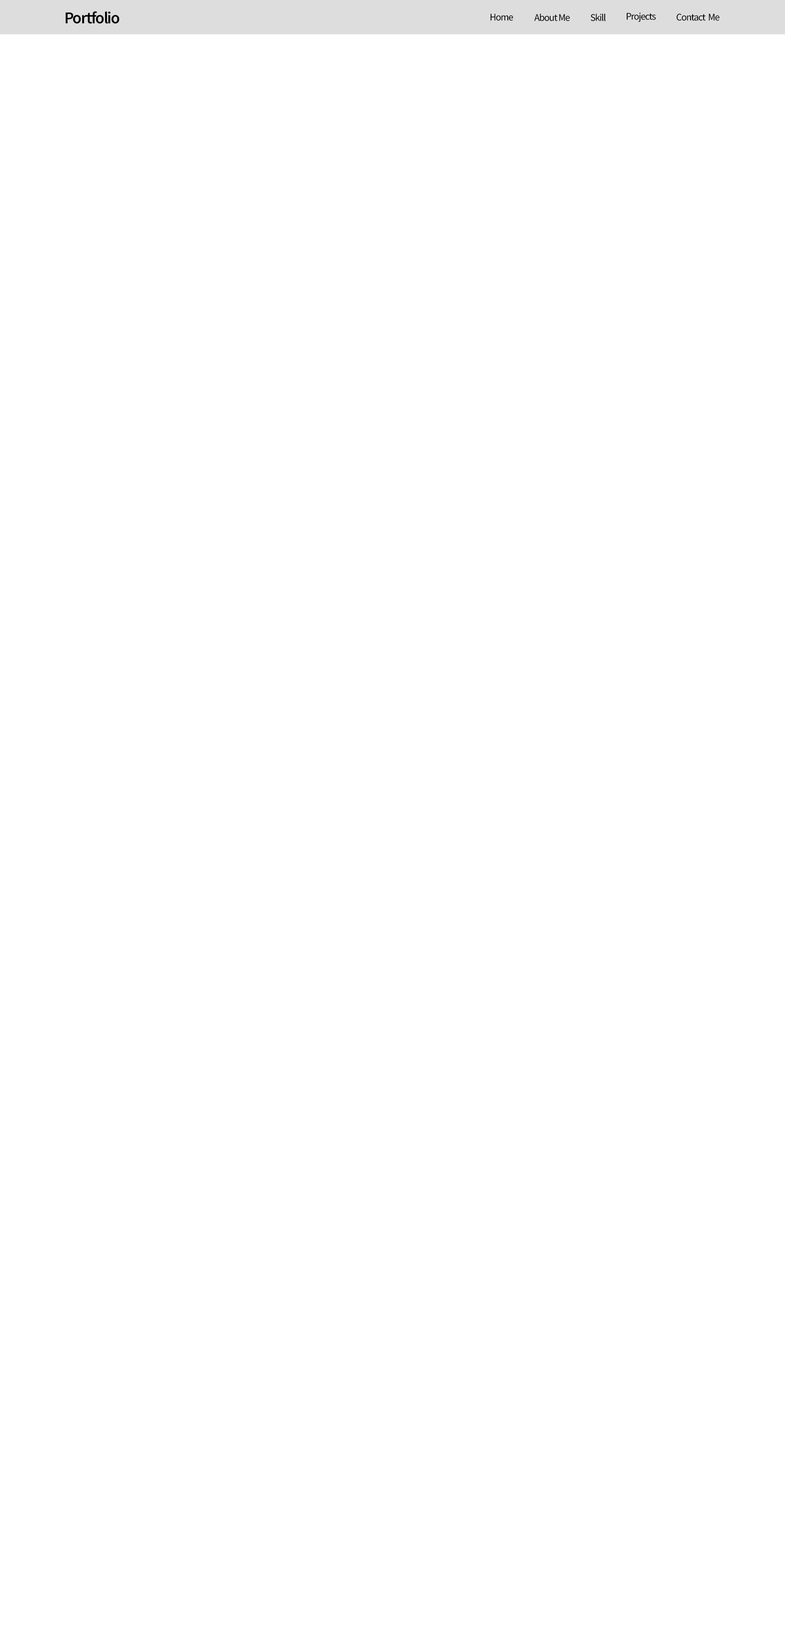
<style>
.page{position:relative;width:785px;height:1636px;background:#ffffff}
.page>*{position:absolute;margin:0}
.t1{font:14.7px "NotoSansKR-SemiBold";letter-spacing:-0.06em;color:#000000}
.t2{font:9px "NotoSansKR-Regular";letter-spacing:-0.06em;color:#000000}
</style>
<div class="page">
<p class="t1" style="left:65px;top:11px;width:54px;height:13px">Portfolio</p>
<p class="t2" style="left:490px;top:13px;width:23px;height:8px">Home</p>
<p class="t2" style="left:534px;top:13px;width:36px;height:8px">About Me</p>
<p class="t2" style="left:591px;top:13px;width:15px;height:8px">Skill</p>
<p class="t2" style="left:627px;top:12px;width:29px;height:10px">Projects</p>
<p class="t2" style="left:677px;top:13px;width:43px;height:8px">Contact  Me</p>
</div>
